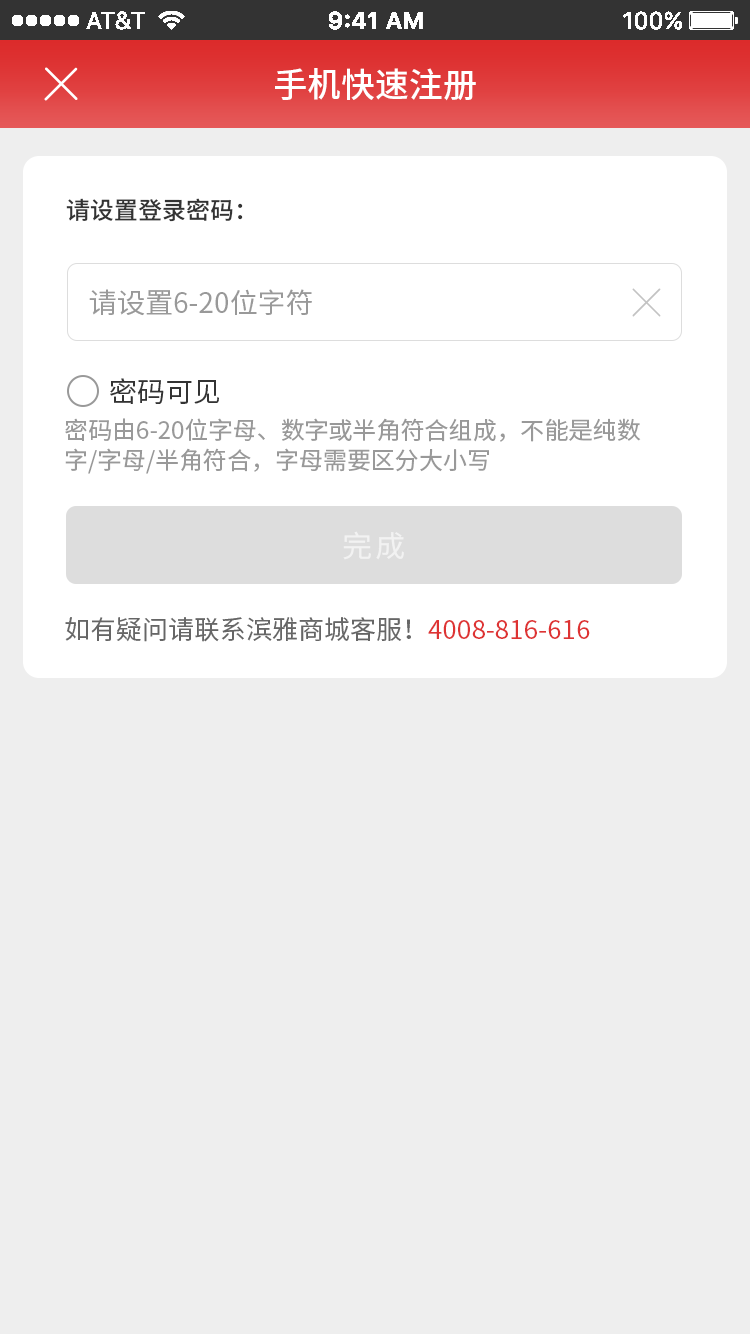
<style>
.page{position:relative;width:750px;height:1334px;background:#eeeeee}
.page>*{position:absolute;margin:0}
.t1{font:34px "SourceHanSansCN-Medium";color:#ffffff}
.t2{font:24px "SourceHanSansCN-Medium";color:#333333}
.t3{font:28px "SourceHanSansCN-Regular";color:#999999}
.t4{font:28px "SourceHanSansCN-Regular";color:#333333}
.t5{font:24px/30px "SourceHanSansCN-Regular";color:#999999}
.t6{font:30px "SourceHanSansCN-Regular";letter-spacing:0.1em;color:#f2f2f2}
.t7{font:26px "SourceHanSansCN-Regular";color:#666666}
.t8{font:26px "SourceHanSansCN-Regular";color:#de3333}
</style>
<div class="page">
<p class="t1" style="left:275px;top:68px;width:201px;height:33px">手机快速注册</p>
<p class="t2" style="left:66px;top:198px;width:177px;height:24px">请设置登录密码：</p>
<p class="t3" style="left:89px;top:289px;width:223px;height:27px">请设置6-20位字符</p>
<p class="t4" style="left:110px;top:378px;width:109px;height:26px">密码可见</p>
<p class="t5" style="left:65px;top:418px;width:576px;height:56px">密码由6-20位字母、数字或半角符合组成，不能是纯数<br>字/字母/半角符合，字母需要区分大小写</p>
<p class="t6" style="left:343px;top:531px;width:61px;height:29px">完成</p>
<p class="t7" style="left:65px;top:617px;width:525px;height:25px">如有疑问请联系滨雅商城客服！<span class="t8">4008-816-616</span></p>
</div>
